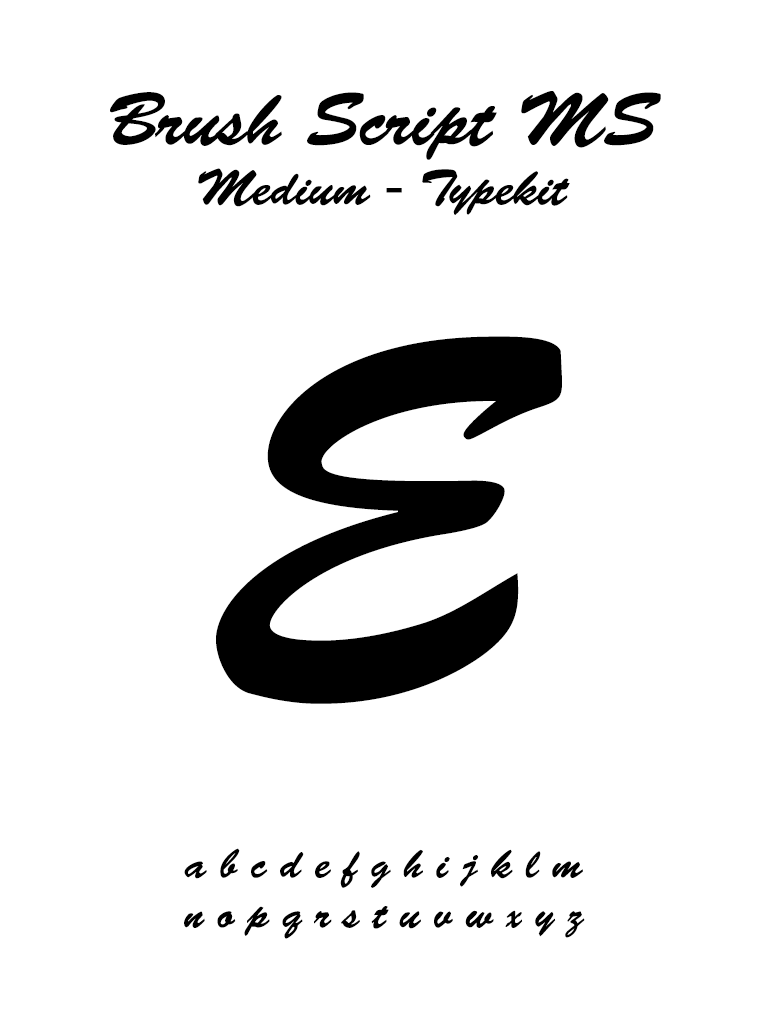
<style>
.page{position:relative;width:768px;height:1024px;background:#ffffff}
.page>*{position:absolute;margin:0}
.t1{font:50px "BrushScriptStd";color:#000000}
.t2{font:75px "BrushScriptStd";color:#000000}
.t3{font:475.3px "BrushScriptStd";color:#000000}
.t4{font:41.7px "BrushScriptStd";color:#000000}
</style>
<div class="page">
<p class="t1" style="left:110px;top:91px;width:551px;height:124px;text-align:center"><span class="t2">Brush Script MS<br></span>Medium - Typekit</p>
<p class="t3" style="left:216px;top:336px;width:346px;height:368px">E</p>
<p class="t4" style="left:184px;top:848px;width:401px;height:91px;text-align:center">a b c d e f g h i j k l m<br>n o p q r s t u v w x y z</p>
</div>
